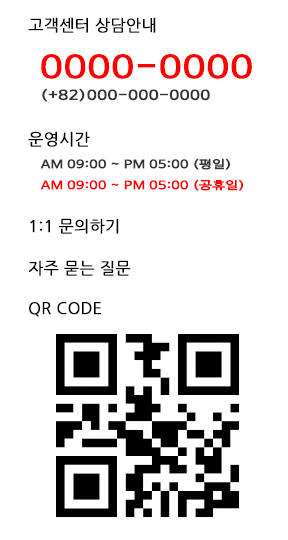
<style>
.page{position:relative;width:288px;height:540px;background:#ffffff}
.page>*{position:absolute;margin:0}
.t1{font:16px "NanumGothic";color:#000000;font-weight:bold}
.t2{font:30px "NanumBarunGothic";color:#fe0000;font-weight:bold;scale:1.3 1}
.t3{font:13px "NanumBarunGothic";color:#333333;font-weight:bold;scale:1.3 1}
.t4{font:11px "NanumBarunGothic";color:#333333;font-weight:bold;scale:1.3 1}
.t5{font:11px "NanumBarunGothic";color:#ff0000;font-weight:bold;scale:1.3 1}
</style>
<div class="page">
<p class="t1" style="left:28px;top:17px;width:128px;height:16px">고객센터 상담안내</p>
<p class="t2" style="left:41px;top:54px;width:211px;height:25px">0000-0000</p>
<p class="t3" style="left:42px;top:88px;width:168px;height:14px">(+82)000-000-0000</p>
<p class="t1" style="left:28px;top:131px;width:62px;height:16px">운영시간</p>
<p class="t4" style="left:40px;top:158px;width:190px;height:12px">AM 09:00 ~ PM 05:00 (평일)</p>
<p class="t5" style="left:40px;top:179px;width:204px;height:12px">AM 09:00 ~ PM 05:00 (공휴일)</p>
<p class="t1" style="left:30px;top:218px;width:89px;height:16px">1:1 문의하기</p>
<p class="t1" style="left:28px;top:260px;width:103px;height:16px">자주 묻는 질문</p>
<p class="t1" style="left:29px;top:302px;width:72px;height:15px">QR CODE</p>
</div>
